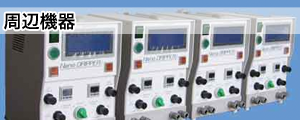
<style>
.page{position:relative;width:300px;height:120px}
.page>*{position:absolute;margin:0}
.t1{font:18px "HiraKakuPro-W6";color:#000000}
</style>
<div class="page">
<p class="t1" style="left:4px;top:12px;width:71px;height:18px">周辺機器</p>
</div>
